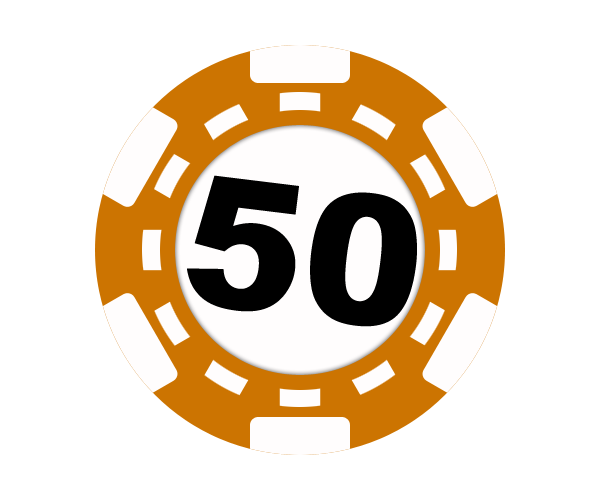
<style>
.page{position:relative;width:600px;height:500px;background:#ffffff}
.page>*{position:absolute;margin:0}
.t1{font:180px "Arial-Black";color:#000000}
</style>
<div class="page">
<p class="t1" style="left:187px;top:175px;width:230px;height:152px;rotate:7deg">50</p>
</div>
